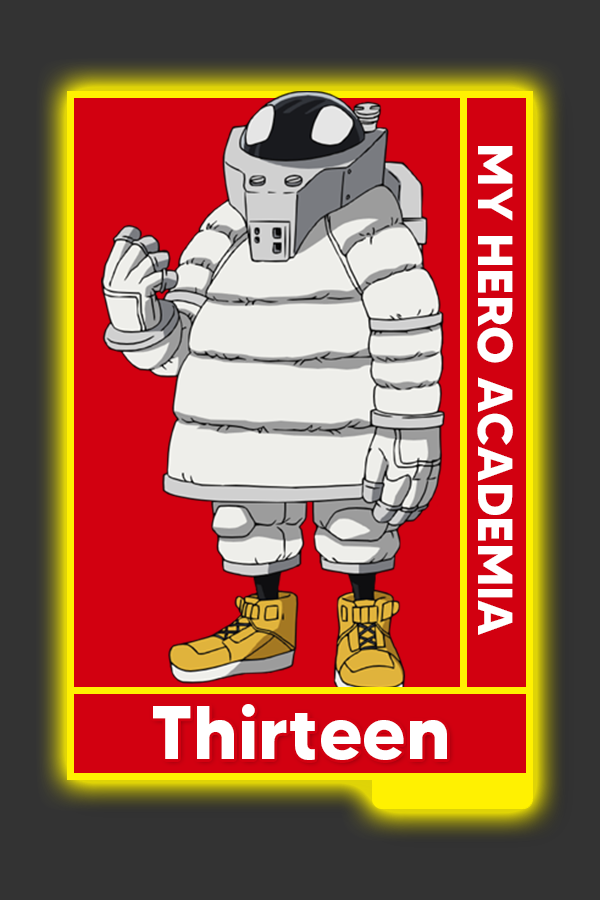
<style>
.page{position:relative;width:600px;height:900px;background:#d20010}
.page>*{position:absolute;margin:0}
.t1{font:48.8px "MADETOMMY-Bold";color:#ffffff}
.t2{font:75px "MADETOMMY-Bold";color:#ffffff}
</style>
<div class="page">
<p class="t1" style="left:477px;top:146px;width:36px;height:489px;rotate:90deg">MY HERO ACADEMIA</p>
<p class="t2" style="left:153px;top:704px;width:294px;height:56px">Thirteen</p>
</div>
